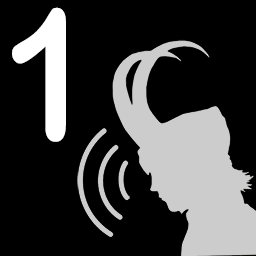
<style>
.page{position:relative;width:256px;height:256px;background:#000000}
.page>*{position:absolute;margin:0}
.t1{font:182.4px "ArialRoundedMTBold";letter-spacing:-0.4em;color:#ffffff;font-variant:small-caps;scale:0.83 1}
</style>
<div class="page">
<p class="t1" style="left:12px;top:7px;width:54px;height:135px">1</p>
</div>
